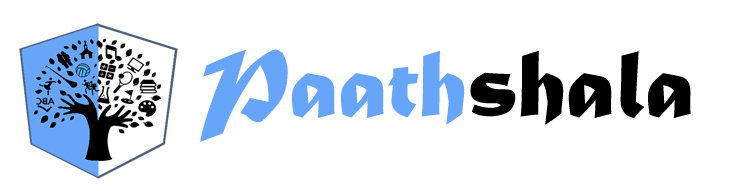
<style>
.page{position:relative;width:742px;height:191px;background:#ffffff}
.page>*{position:absolute;margin:0}
.t1{font:100px "MaturaMTScriptCapitals";color:#67a5fa}
.t2{font:100px "MaturaMTScriptCapitals";color:#000001}
</style>
<div class="page">
<p class="t1" style="left:200px;top:49px;width:491px;height:93px">Paath<span class="t2">shala</span></p>
</div>
